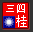
<style>
.page{position:relative;width:33px;height:32px;background:#f20000}
.page>*{position:absolute;margin:0}
.t1{font:10.4px "SimSun";color:#ffffff}
.t2{font:11.7px "SimSun";color:#ffffff}
</style>
<div class="page">
<p class="t1" style="left:6px;top:4px;width:19px;height:9px">三四</p>
<p class="t2" style="left:16px;top:15px;width:11px;height:12px">桂</p>
</div>
